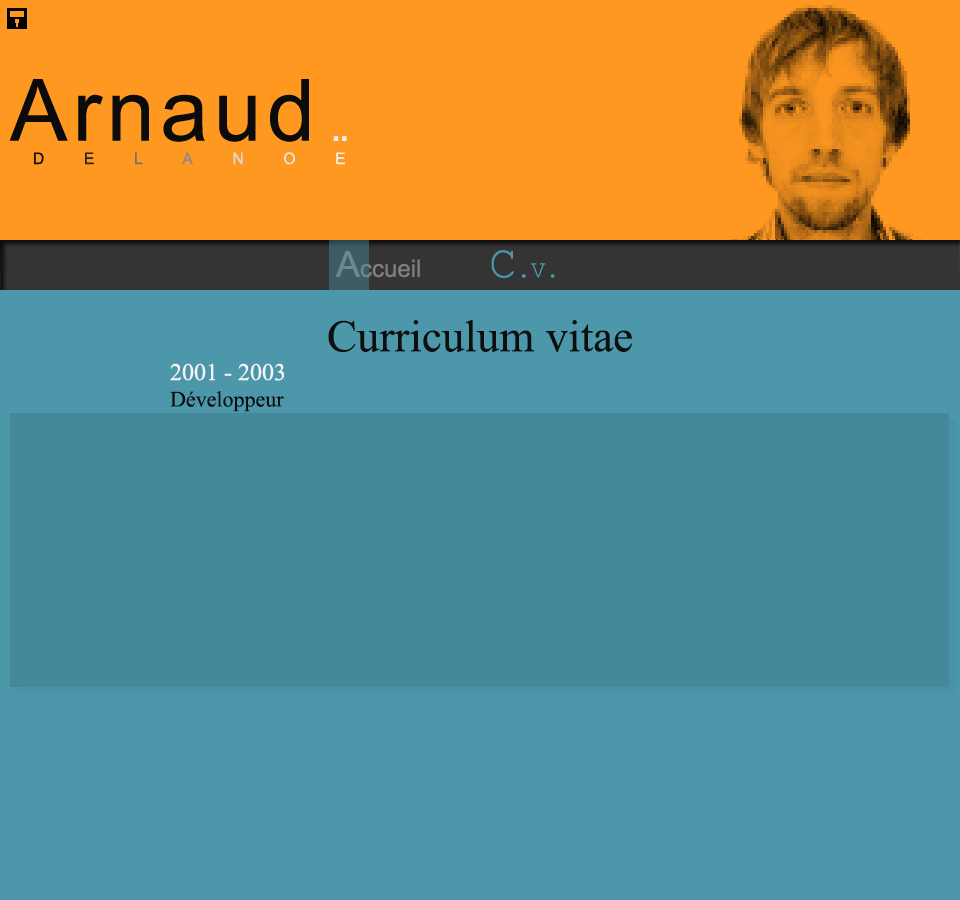
<style>
.page{position:relative;width:960px;height:900px;background:#4c97aa}
.page>*{position:absolute;margin:0}
.t1{font:24px "ArialMT";color:#7f7f7f}
.t2{font:36px "ArialMT";color:#7f7f7f}
.t3{font:24px "CourierNewPSMT";color:#4c97aa}
.t4{font:46px "CourierNewPSMT";color:#4c97aa}
.t5{font:45px "TimesNewRomanPSMT";color:#0e0e0e}
.t6{font:24px "TimesNewRomanPSMT";color:#f4f4f4}
.t7{font:22px "TimesNewRomanPSMT";color:#0e0e0e}
</style>
<div class="page">
<p class="t1" style="left:335px;top:251px;width:85px;height:27px"><span class="t2">A</span>ccueil</p>
<p class="t3" style="left:491px;top:250px;width:64px;height:28px"><span class="t4">C</span>.V.</p>
<p class="t5" style="left:170px;top:320px;width:462px;height:92px;text-align:center">Curriculum vitae<br><span class="t6">2001 - 2003<br></span><span class="t7">Développeur</span></p>
</div>
